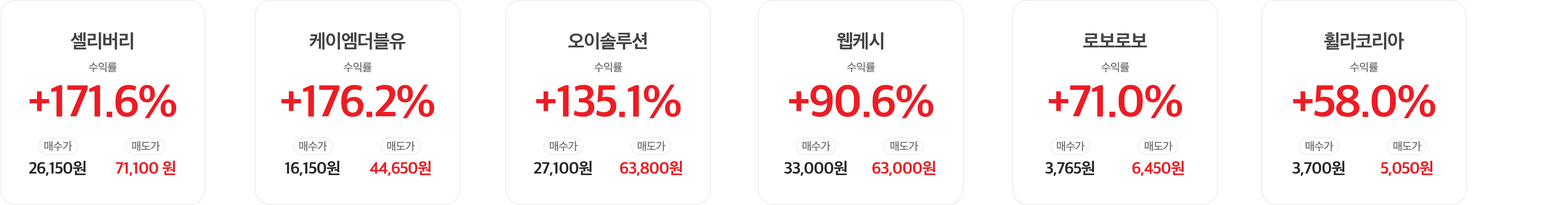
<style>
.page{position:relative;width:1568px;height:205px;background:#ffffff}
.page>*{position:absolute;margin:0}
.t1{font:18.2px "SDGothicNeoa-gBd";letter-spacing:-0.04em;color:#444444}
.t2{font:10.7px "SDGothicNeoa-eMd";letter-spacing:-0.04em;color:#6e6e6e}
.t3{font:42.6px "SDGothicNeoa-gBd";letter-spacing:-0.04em;color:#ed1c24}
.t4{font:15.5px "SDGothicNeoa-gBd";letter-spacing:-0.04em;color:#282828}
.t5{font:15.5px "SDGothicNeoa-gBd";letter-spacing:-0.04em;color:#ed1c24}
</style>
<div class="page">
<p class="t1" style="left:71px;top:32px;width:62px;height:18px">셀리버리</p>
<p class="t1" style="left:310px;top:32px;width:96px;height:18px">케이엠더블유</p>
<p class="t1" style="left:568px;top:32px;width:79px;height:18px">오이솔루션</p>
<p class="t1" style="left:837px;top:32px;width:47px;height:18px">웹케시</p>
<p class="t1" style="left:1083px;top:33px;width:64px;height:15px">로보로보</p>
<p class="t1" style="left:1324px;top:32px;width:80px;height:18px">휠라코리아</p>
<p class="t2" style="left:89px;top:62px;width:28px;height:10px">수익률</p>
<p class="t2" style="left:344px;top:62px;width:28px;height:10px">수익률</p>
<p class="t2" style="left:594px;top:62px;width:28px;height:10px">수익률</p>
<p class="t2" style="left:847px;top:62px;width:28px;height:10px">수익률</p>
<p class="t2" style="left:1101px;top:62px;width:28px;height:10px">수익률</p>
<p class="t2" style="left:1350px;top:62px;width:28px;height:10px">수익률</p>
<p class="t3" style="left:30px;top:85px;width:146px;height:34px">+171.6%</p>
<p class="t3" style="left:281px;top:85px;width:153px;height:34px">+176.2%</p>
<p class="t3" style="left:536px;top:85px;width:145px;height:34px">+135.1%</p>
<p class="t3" style="left:789px;top:85px;width:145px;height:34px">+90.6%</p>
<p class="t3" style="left:1049px;top:85px;width:133px;height:34px">+71.0%</p>
<p class="t3" style="left:1293px;top:85px;width:142px;height:34px">+58.0%</p>
<p class="t2" style="left:44px;top:141px;width:28px;height:11px">매수가</p>
<p class="t2" style="left:132px;top:141px;width:28px;height:11px">매도가</p>
<p class="t2" style="left:299px;top:141px;width:28px;height:11px">매수가</p>
<p class="t2" style="left:387px;top:141px;width:28px;height:11px">매도가</p>
<p class="t2" style="left:550px;top:141px;width:28px;height:11px">매수가</p>
<p class="t2" style="left:638px;top:141px;width:28px;height:11px">매도가</p>
<p class="t2" style="left:802px;top:141px;width:28px;height:11px">매수가</p>
<p class="t2" style="left:890px;top:141px;width:28px;height:11px">매도가</p>
<p class="t2" style="left:1057px;top:141px;width:28px;height:11px">매수가</p>
<p class="t2" style="left:1145px;top:141px;width:28px;height:11px">매도가</p>
<p class="t2" style="left:1305px;top:141px;width:28px;height:11px">매수가</p>
<p class="t2" style="left:1393px;top:141px;width:28px;height:11px">매도가</p>
<p class="t4" style="left:29px;top:161px;width:57px;height:15px">26,150원</p>
<p class="t5" style="left:116px;top:161px;width:59px;height:15px">71,100 원</p>
<p class="t4" style="left:285px;top:161px;width:54px;height:15px">16,150원</p>
<p class="t5" style="left:370px;top:161px;width:61px;height:15px">44,650원</p>
<p class="t4" style="left:534px;top:161px;width:58px;height:15px">27,100원</p>
<p class="t5" style="left:620px;top:161px;width:62px;height:15px">63,800원</p>
<p class="t4" style="left:784px;top:161px;width:63px;height:15px">33,000원</p>
<p class="t5" style="left:872px;top:161px;width:63px;height:15px">63,000원</p>
<p class="t4" style="left:1045px;top:161px;width:49px;height:15px">3,765원</p>
<p class="t5" style="left:1132px;top:161px;width:52px;height:15px">6,450원</p>
<p class="t4" style="left:1292px;top:161px;width:53px;height:15px">3,700원</p>
<p class="t5" style="left:1381px;top:161px;width:52px;height:15px">5,050원</p>
</div>
